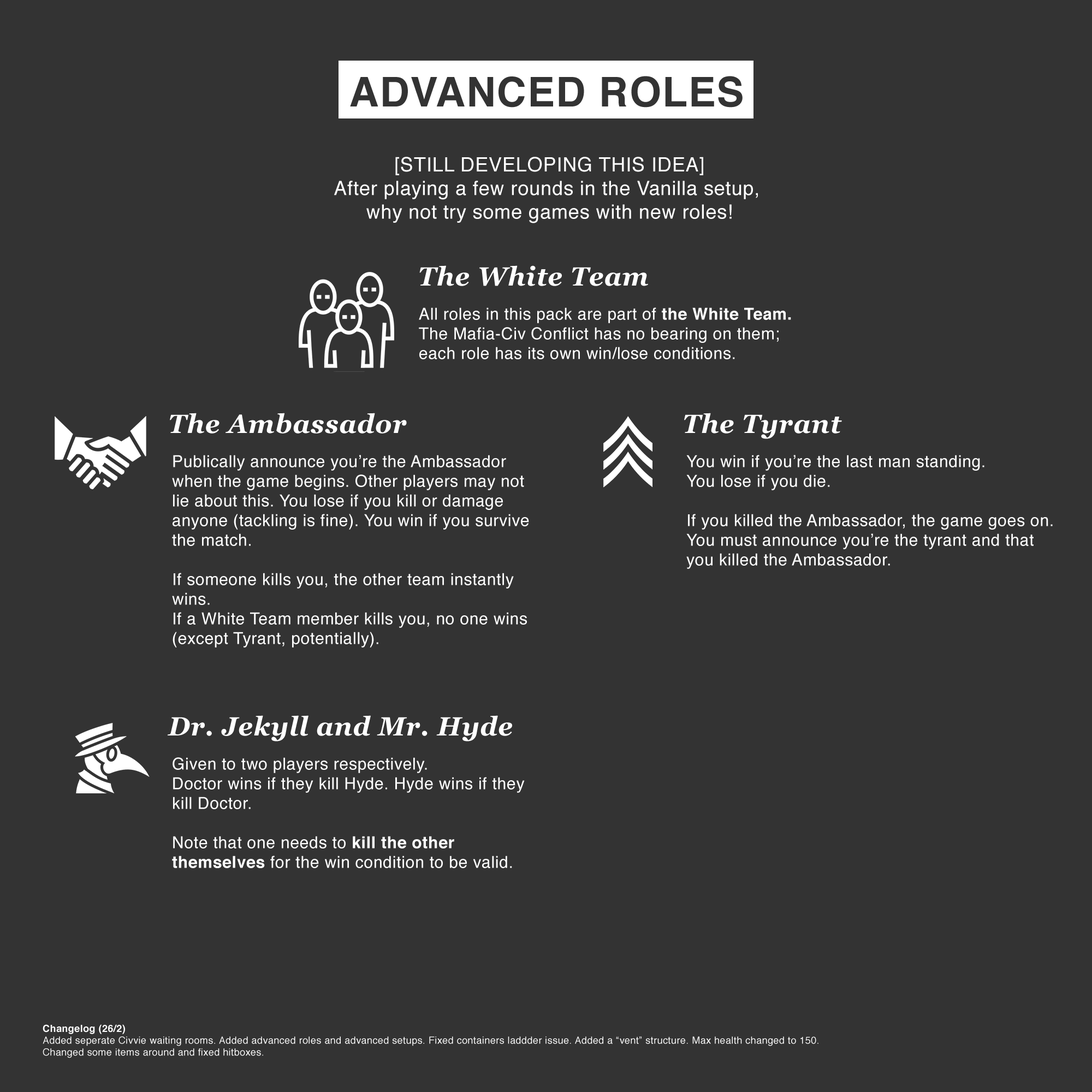
<style>
.page{position:relative;width:1092px;height:1092px;background:#333333}
.page>*{position:absolute;margin:0}
.t1{font:19.7px "Helvetica";letter-spacing:0.025em;color:#ffffff}
.t2{font:26.2px "Georgia-BoldItalic";letter-spacing:0.025em;color:#ffffff}
.t3{font:16.4px "Helvetica";letter-spacing:0.025em;color:#ffffff}
.t4{font:16.4px "Helvetica-Bold";letter-spacing:0.025em;color:#ffffff}
.t5{font:9.8px "Helvetica";letter-spacing:0.025em;color:#ffffff}
.t6{font:9.8px "Helvetica-Bold";letter-spacing:0.025em;color:#ffffff}
</style>
<div class="page">
<p class="t1" style="left:334px;top:157px;width:424px;height:66px;text-align:center">[STILL DEVELOPING THIS IDEA]<br>After playing a few rounds in the Vanilla setup, <br>why not try some games with new roles!</p>
<p class="t2" style="left:419px;top:265px;width:229px;height:21px">The White Team</p>
<p class="t3" style="left:419px;top:307px;width:372px;height:52px">All roles in this pack are part of <span class="t4">the White Team.</span> The Mafia-Civ Conflict has no bearing on them; each role has its own win/lose conditions.</p>
<p class="t2" style="left:170px;top:413px;width:237px;height:21px">The Ambassador</p>
<p class="t2" style="left:684px;top:413px;width:158px;height:26px">The Tyrant</p>
<p class="t3" style="left:172px;top:455px;width:357px;height:193px">Publically announce you’re the Ambassador when the game begins. Other players may not lie about this. You lose if you kill or damage anyone (tackling is fine). You win if you survive the match.<br><br>If someone kills you, the other team instantly wins.<br>If a White Team member kills you, no one wins (except Tyrant, potentially).</p>
<p class="t3" style="left:686px;top:455px;width:367px;height:114px">You win if you’re the last man standing.<br>You lose if you die.<br><br>If you killed the Ambassador, the game goes on. You must announce you’re the tyrant and that you killed the Ambassador.</p>
<p class="t2" style="left:167px;top:715px;width:345px;height:26px">Dr. Jekyll and Mr. Hyde</p>
<p class="t3" style="left:172px;top:757px;width:353px;height:111px">Given to two players respectively.<br>Doctor wins if they kill Hyde. Hyde wins if they kill Doctor.<br><br>Note that one needs to <span class="t4">kill the other themselves </span>for the win condition to be valid.</p>
<p class="t5" style="left:43px;top:1024px;width:775px;height:34px"><span class="t6">Changelog (26/2)<br></span>Added seperate Civvie waiting rooms. Added advanced roles and advanced setups. Fixed containers laddder issue. Added a “vent” structure. Max health changed to 150.<br>Changed some items around and fixed hitboxes.</p>
</div>
